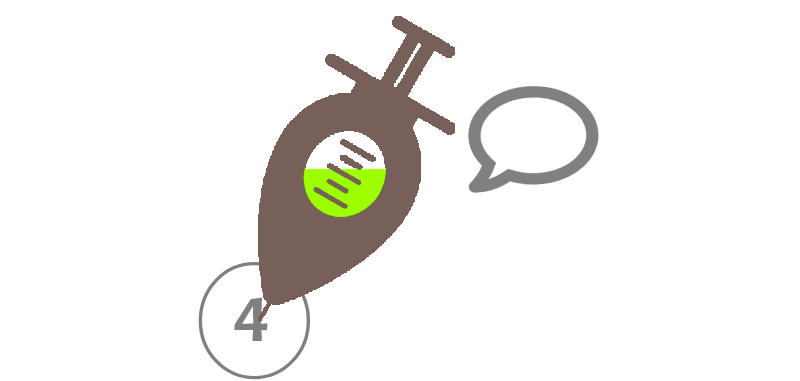
<style>
.page{position:relative;width:800px;height:381px;background:#ffffff}
.page>*{position:absolute;margin:0}
.t1{font:67.4px "Acme-Regular";color:#808080}
</style>
<div class="page">
<p class="t1" style="left:234px;top:297px;width:34px;height:44px">4</p>
</div>
